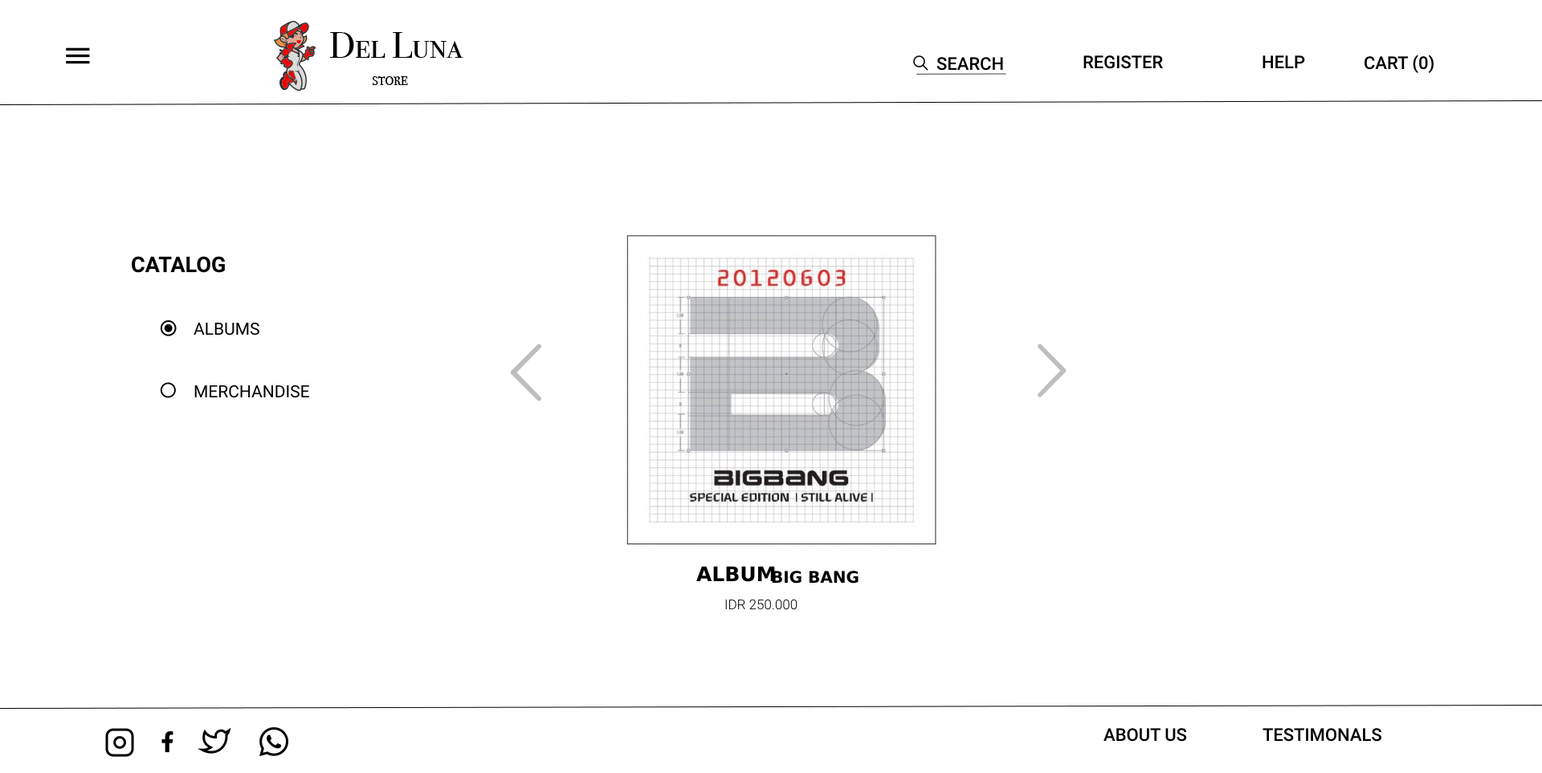
<style>
.page{position:relative;width:1542px;height:773px;background:#ffffff}
.page>*{position:absolute;margin:0}
.t1{font:36.1px "BodoniSvtyTwoSCITCTT-Book";color:#000000}
.t2{font:17.7px "HelveticaNeue-Medium";color:#000000}
.t3{font:12px "BodoniSvtyTwoSCITCTT-Book";color:#000000}
.t4{font:21.7px "HelveticaNeue-Bold";color:#000000}
.t5{font:16.9px "HelveticaNeue";color:#000000}
.t6{font:20.1px "HelveticaNeue-CondensedBold";color:#000000}
.t7{font:16.1px "HelveticaNeue-CondensedBold";color:#000000}
.t8{font:13.7px "HelveticaNeue-Light";color:#000000}
</style>
<div class="page">
<p class="t1" style="left:330px;top:32px;width:133px;height:26px">Del Luna</p>
<p class="t2" style="left:936px;top:57px;width:67px;height:14px">SEARCH</p>
<p class="t2" style="left:1083px;top:55px;width:80px;height:14px">REGISTER</p>
<p class="t2" style="left:1262px;top:55px;width:43px;height:13px">HELP</p>
<p class="t2" style="left:1364px;top:55px;width:69px;height:18px">CART (0)</p>
<p class="t3" style="left:372px;top:76px;width:36px;height:9px">STORE</p>
<p class="t4" style="left:132px;top:256px;width:93px;height:17px">CATALOG</p>
<p class="t5" style="left:194px;top:322px;width:65px;height:14px">ALBUMS</p>
<p class="t5" style="left:194px;top:385px;width:115px;height:13px">MERCHANDISE</p>
<p class="t6" style="left:696px;top:566px;width:79px;height:16px">ALBUM</p>
<p class="t7" style="left:772px;top:571px;width:86px;height:13px">BIG BANG</p>
<p class="t8" style="left:725px;top:599px;width:72px;height:11px">IDR 250.000</p>
<p class="t2" style="left:1103px;top:728px;width:84px;height:14px">ABOUT US</p>
<p class="t2" style="left:1262px;top:728px;width:119px;height:14px">TESTIMONALS</p>
</div>
